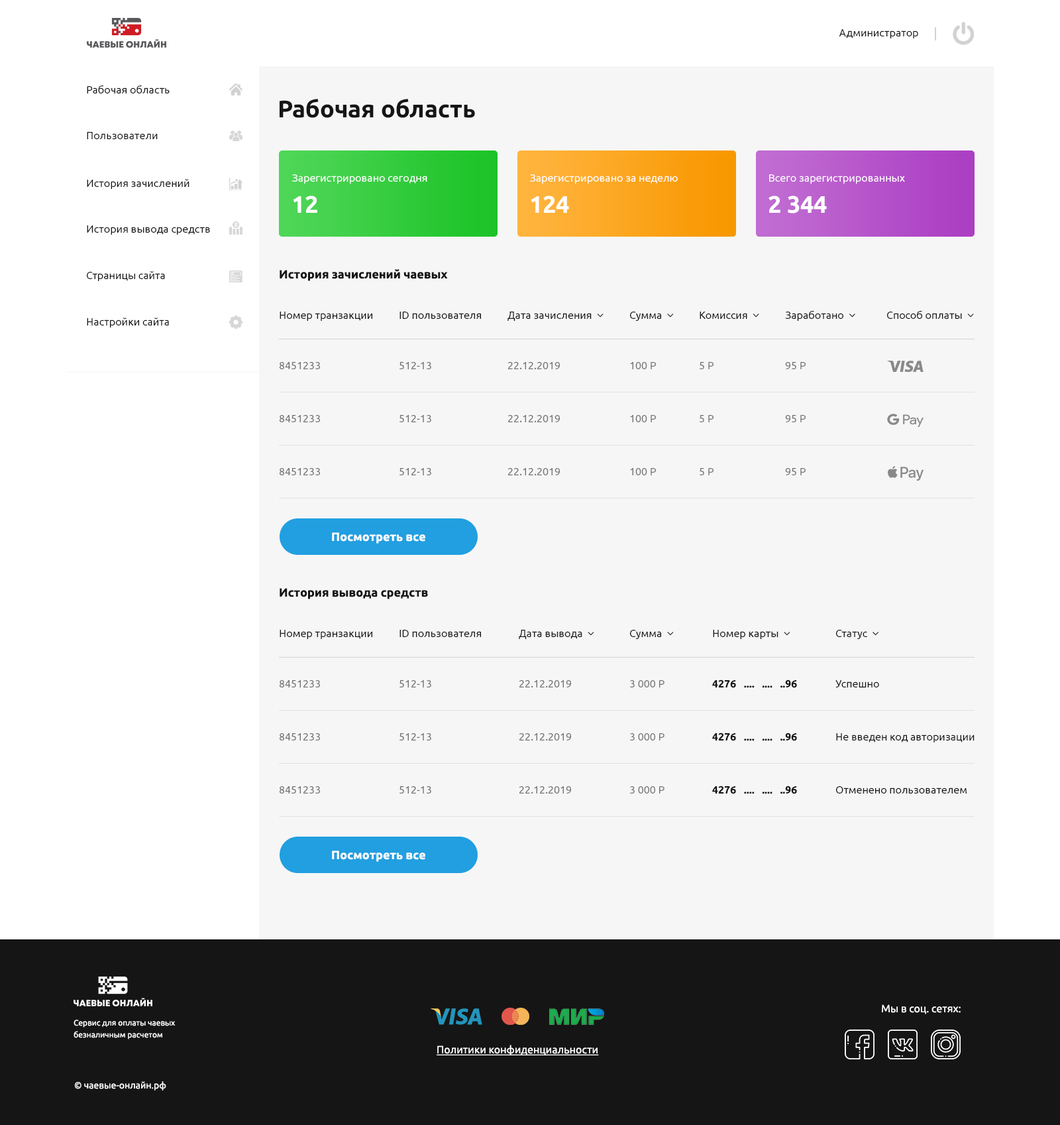
<style>
.page{position:relative;width:1060px;height:1125px;background:#f6f6f6}
.page>*{position:absolute;margin:0}
.t1{font:10.6px "Ubuntu-Regular";color:#151515}
.t2{font:23.9px "Ubuntu-Bold";color:#151515}
.t3{font:10.6px "Ubuntu-Regular";color:#ffffff}
.t4{font:23.9px "Ubuntu-Bold";color:#ffffff}
.t5{font:11.9px "Ubuntu-Bold";color:#151515}
.t6{font:10.6px "Ubuntu-Regular";color:#717171}
.t7{font:10.6px "Ubuntu-Regular";color:#727272}
.t8{font:11.9px "Ubuntu-Bold";color:#ffffff}
.t9{font:10.6px "Ubuntu-Bold";color:#151515}
.t10{font:8px/6px "Ubuntu-Regular";color:#ffffff}
.t11{font:10.6px "Ubuntu-Regular";color:#ffffff;text-decoration:underline}
.t12{font:9.3px "Ubuntu-Regular";color:#ffffff}
</style>
<div class="page">
<p class="t1" style="left:839px;top:29px;width:80px;height:9px">Администратор</p>
<p class="t1" style="left:87px;top:85px;width:83px;height:8px">Рабочая область</p>
<p class="t2" style="left:280px;top:99px;width:195px;height:19px">Рабочая область</p>
<p class="t1" style="left:87px;top:132px;width:71px;height:7px">Пользователи</p>
<p class="t1" style="left:87px;top:179px;width:103px;height:10px">История зачислений</p>
<p class="t3" style="left:292px;top:174px;width:135px;height:10px">Зарегистрировано сегодня</p>
<p class="t3" style="left:530px;top:174px;width:148px;height:10px">Зарегистрировано за неделю</p>
<p class="t3" style="left:769px;top:174px;width:136px;height:10px">Всего зарегистрированных</p>
<p class="t4" style="left:293px;top:195px;width:24px;height:18px">12</p>
<p class="t4" style="left:531px;top:195px;width:38px;height:18px">124</p>
<p class="t4" style="left:769px;top:195px;width:58px;height:18px">2 344</p>
<p class="t1" style="left:87px;top:225px;width:123px;height:10px">История вывода средств</p>
<p class="t5" style="left:280px;top:269px;width:168px;height:12px">История зачислений чаевых</p>
<p class="t1" style="left:87px;top:271px;width:78px;height:10px">Страницы сайта</p>
<p class="t1" style="left:87px;top:317px;width:82px;height:10px">Настройки сайта</p>
<p class="t1" style="left:280px;top:311px;width:92px;height:10px">Номер транзакции</p>
<p class="t1" style="left:400px;top:311px;width:81px;height:8px">ID пользователя</p>
<p class="t6" style="left:280px;top:362px;width:40px;height:7px">8451233</p>
<p class="t6" style="left:400px;top:362px;width:31px;height:7px">512-13</p>
<p class="t7" style="left:508px;top:362px;width:52px;height:7px">22.12.2019</p>
<p class="t7" style="left:630px;top:362px;width:26px;height:7px">100 Р</p>
<p class="t7" style="left:700px;top:362px;width:14px;height:7px">5 Р</p>
<p class="t7" style="left:785px;top:362px;width:21px;height:7px">95 Р</p>
<p class="t6" style="left:280px;top:415px;width:40px;height:7px">8451233</p>
<p class="t6" style="left:400px;top:415px;width:31px;height:7px">512-13</p>
<p class="t7" style="left:508px;top:415px;width:52px;height:7px">22.12.2019</p>
<p class="t7" style="left:630px;top:415px;width:26px;height:7px">100 Р</p>
<p class="t7" style="left:700px;top:415px;width:14px;height:7px">5 Р</p>
<p class="t7" style="left:785px;top:415px;width:21px;height:7px">95 Р</p>
<p class="t6" style="left:280px;top:468px;width:40px;height:7px">8451233</p>
<p class="t6" style="left:400px;top:468px;width:31px;height:7px">512-13</p>
<p class="t7" style="left:508px;top:468px;width:52px;height:7px">22.12.2019</p>
<p class="t7" style="left:630px;top:468px;width:26px;height:7px">100 Р</p>
<p class="t7" style="left:700px;top:468px;width:14px;height:7px">5 Р</p>
<p class="t7" style="left:785px;top:468px;width:21px;height:7px">95 Р</p>
<p class="t8" style="left:332px;top:532px;width:93px;height:11px">Посмотреть все</p>
<p class="t5" style="left:280px;top:588px;width:148px;height:11px">История вывода средств</p>
<p class="t1" style="left:280px;top:630px;width:92px;height:9px">Номер транзакции</p>
<p class="t1" style="left:400px;top:630px;width:81px;height:7px">ID пользователя</p>
<p class="t6" style="left:280px;top:680px;width:40px;height:7px">8451233</p>
<p class="t6" style="left:400px;top:680px;width:31px;height:7px">512-13</p>
<p class="t7" style="left:519px;top:680px;width:52px;height:7px">22.12.2019</p>
<p class="t7" style="left:630px;top:680px;width:35px;height:7px">3 000 Р</p>
<p class="t9" style="left:712px;top:679px;width:85px;height:9px">4276   ....   ....   ..96</p>
<p class="t1" style="left:836px;top:680px;width:43px;height:7px">Успешно</p>
<p class="t6" style="left:280px;top:733px;width:40px;height:7px">8451233</p>
<p class="t6" style="left:400px;top:733px;width:31px;height:7px">512-13</p>
<p class="t7" style="left:519px;top:733px;width:52px;height:7px">22.12.2019</p>
<p class="t7" style="left:630px;top:733px;width:35px;height:7px">3 000 Р</p>
<p class="t9" style="left:712px;top:732px;width:85px;height:9px">4276   ....   ....   ..96</p>
<p class="t1" style="left:836px;top:733px;width:139px;height:9px">Не введен код авторизации</p>
<p class="t6" style="left:280px;top:786px;width:40px;height:7px">8451233</p>
<p class="t6" style="left:400px;top:786px;width:31px;height:7px">512-13</p>
<p class="t7" style="left:519px;top:786px;width:52px;height:7px">22.12.2019</p>
<p class="t7" style="left:630px;top:786px;width:35px;height:7px">3 000 Р</p>
<p class="t9" style="left:712px;top:785px;width:85px;height:9px">4276   ....   ....   ..96</p>
<p class="t1" style="left:836px;top:786px;width:131px;height:7px">Отменено пользователем</p>
<p class="t8" style="left:332px;top:850px;width:93px;height:12px">Посмотреть все</p>
<p class="t3" style="left:882px;top:1004px;width:79px;height:10px">Мы в соц. сетях:</p>
<p class="t10" style="left:74px;top:1019px;width:102px;height:20px">Сервис для оплаты чаевых<br><br>безналичным расчетом</p>
<p class="t11" style="left:437px;top:1044px;width:162px;height:11px">Политики конфиденциальности</p>
<p class="t12" style="left:74px;top:1081px;width:92px;height:9px">© чаевые-онлайн.рф</p>
</div>
